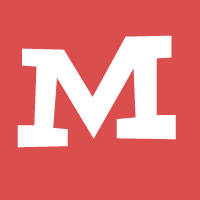
<style>
.page{position:relative;width:200px;height:200px;background:#db4e4e}
.page>*{position:absolute;margin:0}
.t1{font:133.3px "Yahoo";color:#ffffff;scale:0.8 1}
</style>
<div class="page">
<p class="t1" style="left:17px;top:35px;width:159px;height:113px">M</p>
</div>
